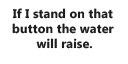
<style>
.page{position:relative;width:128px;height:64px;background:#ffffff}
.page>*{position:absolute;margin:0}
.t1{font:12.5px "MicrosoftPhagsPa-Bold";letter-spacing:0.01em;color:#1e1e1e}
</style>
<div class="page">
<p class="t1" style="left:12px;top:8px;width:102px;height:41px;text-align:center">If I stand on that <br>button the water <br>will raise.</p>
</div>
